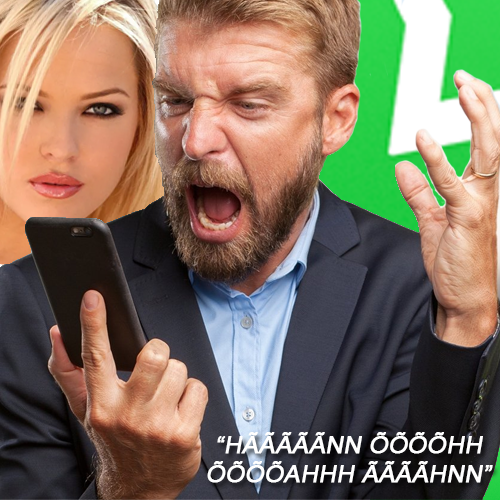
<style>
.page{position:relative;width:500px;height:500px}
.page>*{position:absolute;margin:0}
.t1{font:24px "ArialMT";color:#ffffff;font-weight:bold;font-style:italic}
</style>
<div class="page">
<p class="t1" style="left:207px;top:432px;width:286px;height:51px;text-align:center">“HÃÃÃÃÃNN ÕÕÕÕHH<br>ÕÕÕÕAHHH ÃÃÃÃHNN”</p>
</div>
